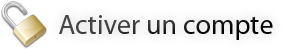
<style>
.page{position:relative;width:282px;height:49px;background:#ffffff}
.page>*{position:absolute;margin:0}
.t1{font:28px "MyriadPro-Regular"}
</style>
<div class="page">
<p class="t1" style="left:59px;top:15px;width:214px;height:25px">Activer un compte</p>
</div>
